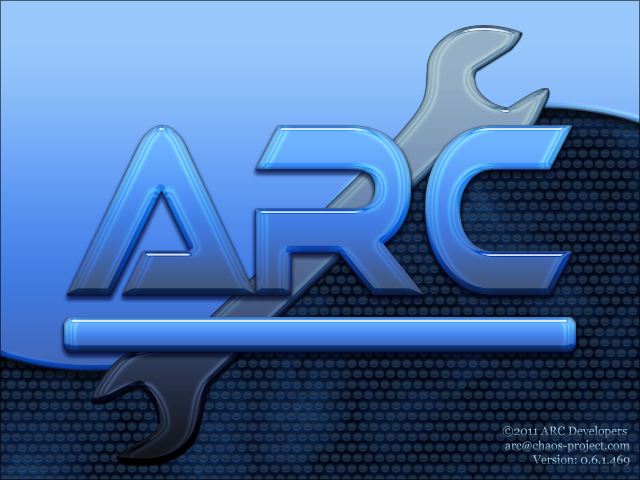
<style>
.page{position:relative;width:640px;height:480px}
.page>*{position:absolute;margin:0}
.t1{font:12px "Georgia"}
</style>
<div class="page">
<p class="t1" style="left:502px;top:426px;width:128px;height:40px;text-align:right">©2011 ARC Developers <br>arc@chaos-project.com<br>Version: 0.6.1.469</p>
</div>
